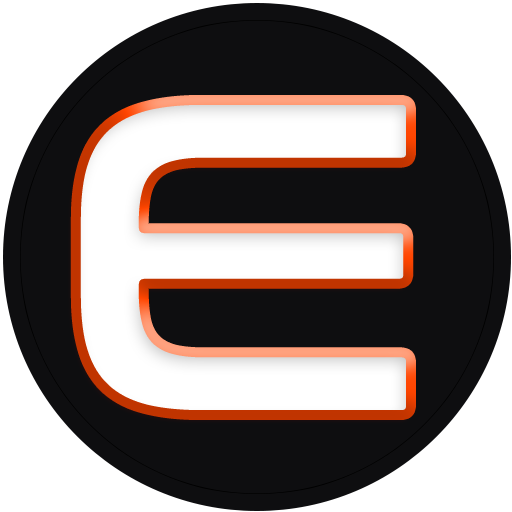
<style>
.page{position:relative;width:512px;height:512px;background:#0e0e10}
.page>*{position:absolute;margin:0}
.t1{font:450px "ConthraxSb-Regular";letter-spacing:0.01em;color:#ffffff}
</style>
<div class="page">
<p class="t1" style="left:75px;top:100px;width:336px;height:315px">E</p>
</div>
